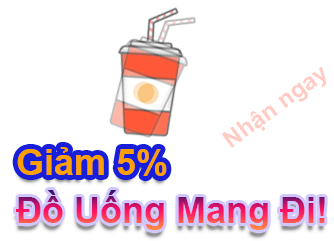
<style>
.page{position:relative;width:334px;height:241px;background:#ffffff}
.page>*{position:absolute;margin:0}
.t1{font:24px "Arial-BoldMT";color:#ffccc5}
.t2{font:36px "Arial-BoldMT";color:#fea100}
.t3{font:36px "Arial-BoldMT"}
</style>
<div class="page">
<p class="t1" style="left:221px;top:66px;width:106px;height:82px;rotate:-36deg">Nhận ngay</p>
<p class="t2" style="left:17px;top:147px;width:150px;height:29px">Giảm 5%</p>
<p class="t3" style="left:16px;top:190px;width:309px;height:40px">Đồ Uống Mang Đi!</p>
</div>
